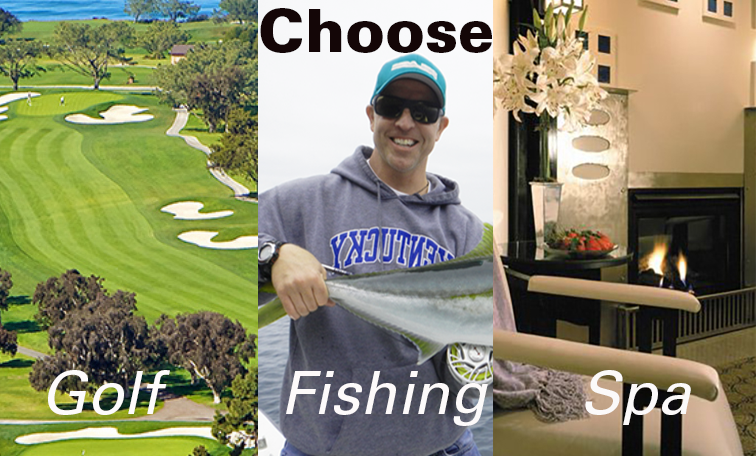
<style>
.page{position:relative;width:756px;height:456px}
.page>*{position:absolute;margin:0}
.t1{font:60px "UniversLTStd-Black";color:#140607}
.t2{font:60px "UniversLTStd-Obl";color:#fdfbfb}
.t3{font:60px "UniversLTStd-Obl";color:#fdfafa}
.t4{font:60px "UniversLTStd-Obl";color:#fbf9f9}
</style>
<div class="page">
<p class="t1" style="left:260px;top:8px;width:232px;height:45px">Choose</p>
<p class="t2" style="left:48px;top:370px;width:122px;height:45px">Golf</p>
<p class="t3" style="left:286px;top:371px;width:202px;height:55px">Fishing</p>
<p class="t4" style="left:585px;top:370px;width:106px;height:55px">Spa</p>
</div>
